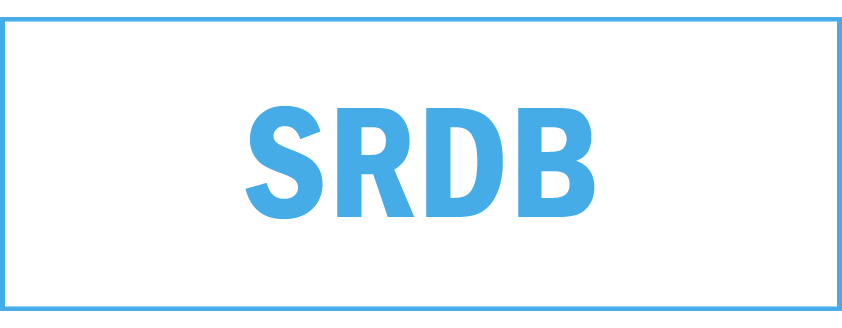
<style>
.page{position:relative;width:842px;height:328px;background:#ffffff}
.page>*{position:absolute;margin:0}
.t1{font:164px "FranklinGothic-DemiCond";color:#46ace8}
</style>
<div class="page">
<p class="t1" style="left:245px;top:106px;width:350px;height:113px">SRDB</p>
</div>
